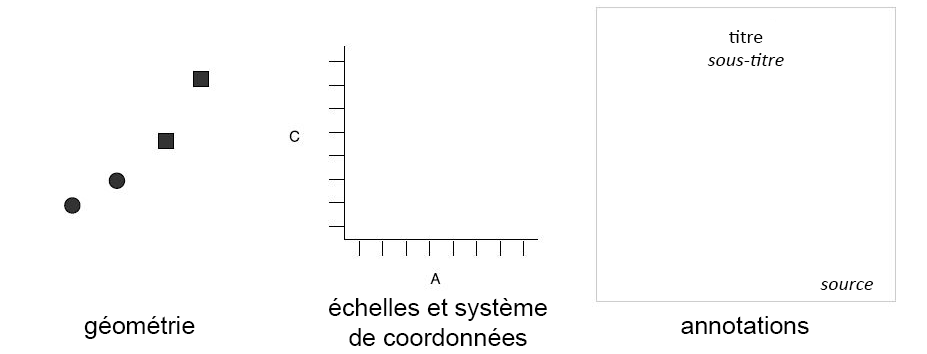
<style>
.page{position:relative;width:927px;height:354px;background:#ffffff}
.page>*{position:absolute;margin:0}
.t1{font:20px "Calibri";color:#000000}
.t2{font:12px "Calibri-Italic";color:#000000}
.t3{font:25px "ArialMT";color:#000000}
</style>
<div class="page">
<p class="t1" style="left:729px;top:30px;width:34px;height:13px">titre</p>
<p class="t2" style="left:707px;top:53px;width:77px;height:13px">sous-titre</p>
<p class="t2" style="left:820px;top:281px;width:54px;height:9px">source</p>
<p class="t3" style="left:329px;top:298px;width:218px;height:48px;text-align:center">échelles et système<br>de coordonnées</p>
<p class="t3" style="left:84px;top:316px;width:111px;height:23px">géométrie</p>
<p class="t3" style="left:681px;top:316px;width:128px;height:18px">annotations</p>
</div>
